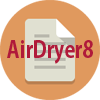
<style>
.page{position:relative;width:100px;height:100px;background:#e0995e}
.page>*{position:absolute;margin:0}
.t1{font:23.1px "AdobeGothicStd-Bold";color:#b01a3a;scale:0.84 1}
</style>
<div class="page">
<p class="t1" style="left:7px;top:40px;width:86px;height:24px">AirDryer8</p>
</div>
